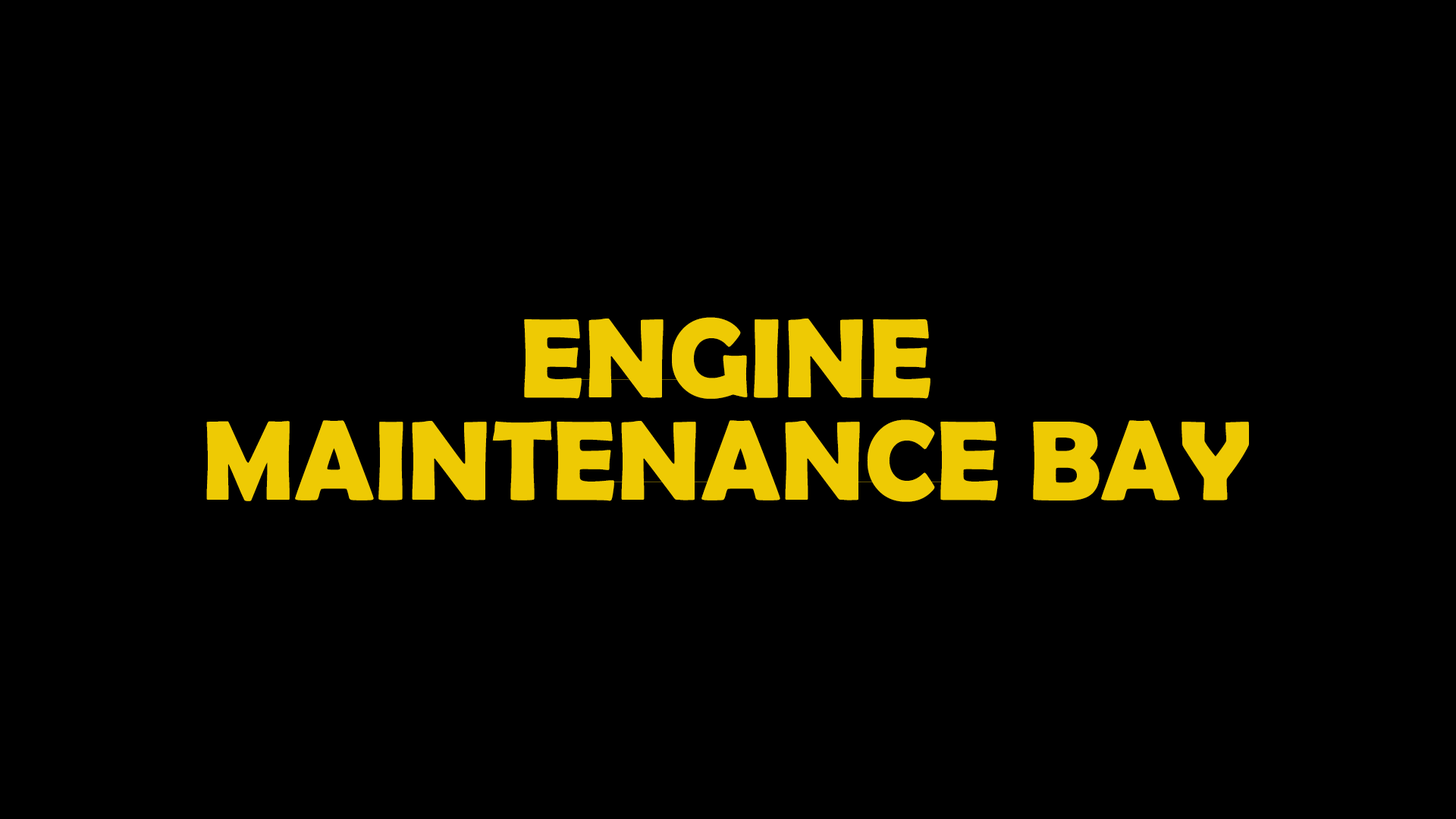
<style>
.page{position:relative;width:1456px;height:819px;background:#000000}
.page>*{position:absolute;margin:0}
.t1{font:113.7px/102.4px "BerlinSansFBDemi-Bold";color:#eeca04}
</style>
<div class="page">
<p class="t1" style="left:206px;top:317px;width:1043px;height:185px;text-align:center">ENGINE<br>MAINTENANCE BAY</p>
</div>
